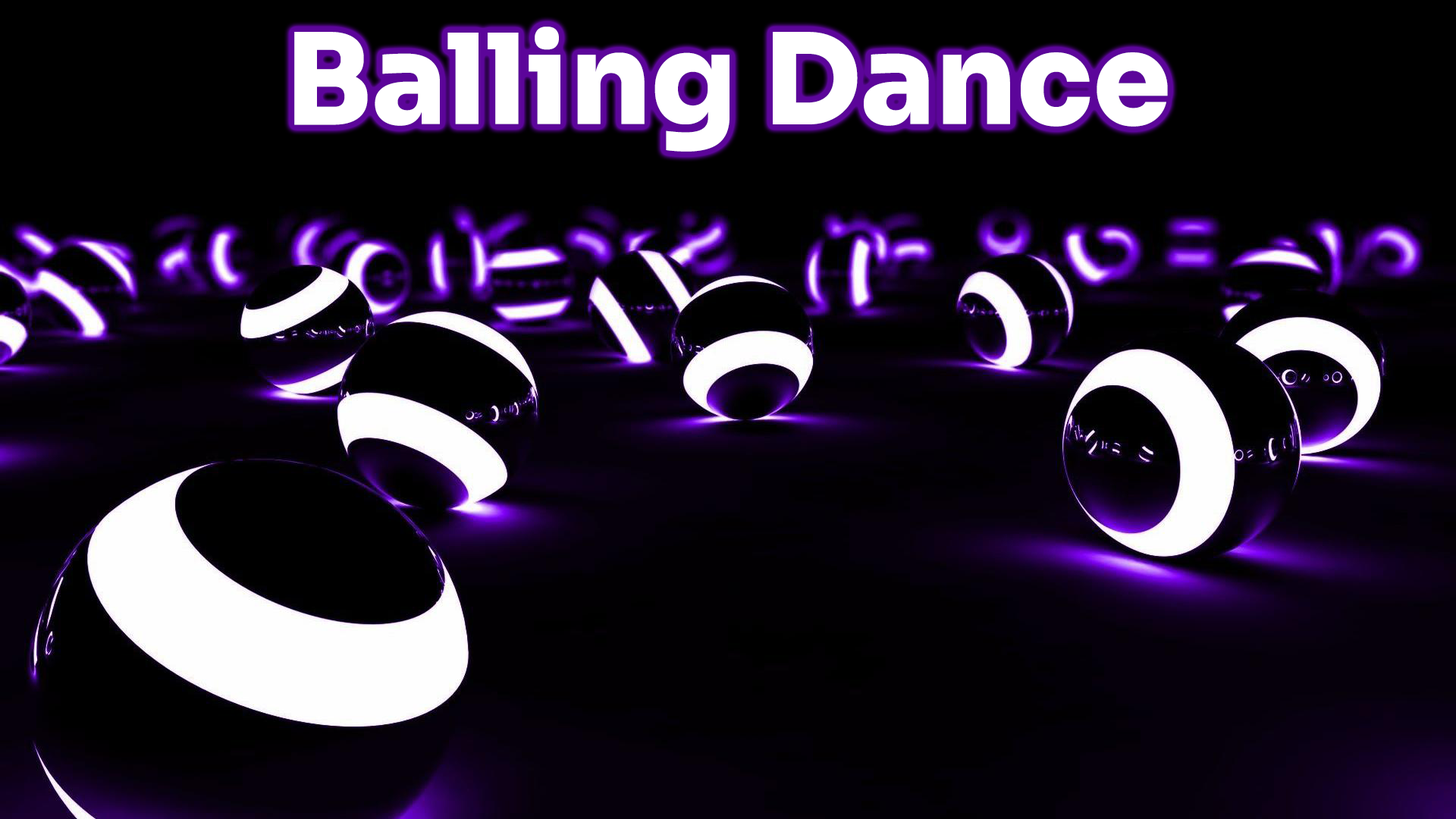
<style>
.page{position:relative;width:1456px;height:819px;background:#000000}
.page>*{position:absolute;margin:0}
.t1{font:124.8px "Sora-ExtraBold";color:#ffffff}
</style>
<div class="page">
<p class="t1" style="left:294px;top:27px;width:874px;height:125px">Balling Dance</p>
</div>
